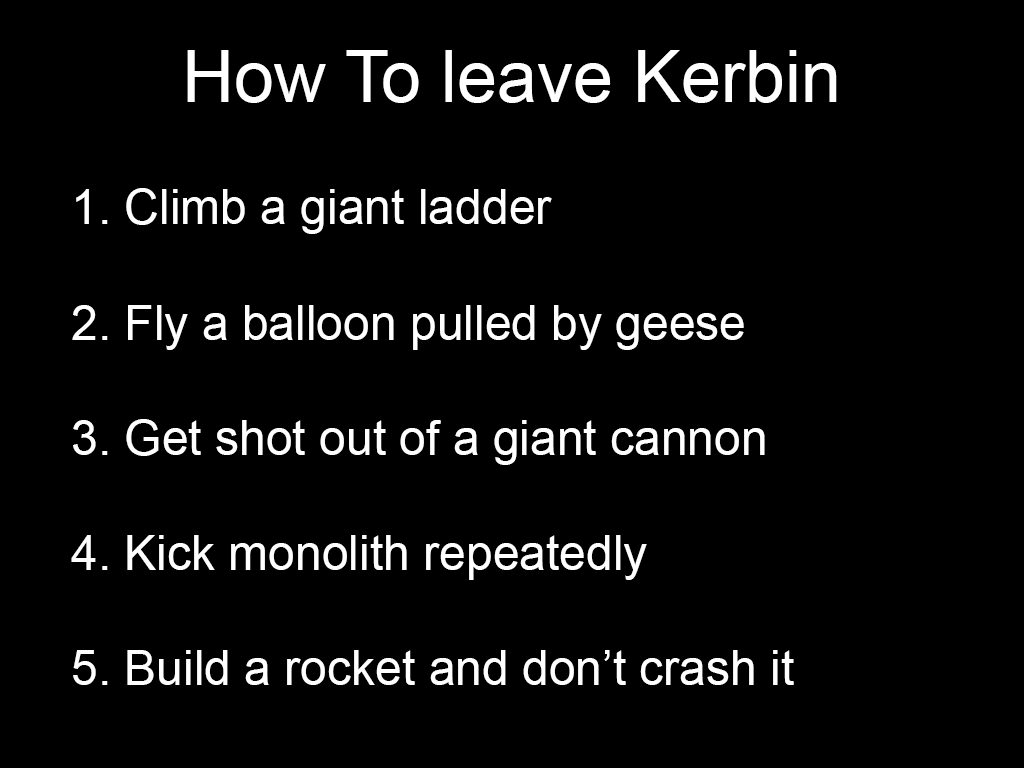
<style>
.page{position:relative;width:1024px;height:768px;background:#000000}
.page>*{position:absolute;margin:0}
.t1{font:72px "ArialMT";color:#ffffff}
.t2{font:48px "ArialMT";color:#ffffff}
</style>
<div class="page">
<p class="t1" style="left:187px;top:50px;width:650px;height:53px">How To leave Kerbin</p>
<p class="t2" style="left:71px;top:188px;width:723px;height:497px">1. Climb a giant ladder<br><br>2. Fly a balloon pulled by geese<br><br>3. Get shot out of a giant cannon<br><br>4. Kick monolith repeatedly<br><br>5. Build a rocket and don’t crash it</p>
</div>
